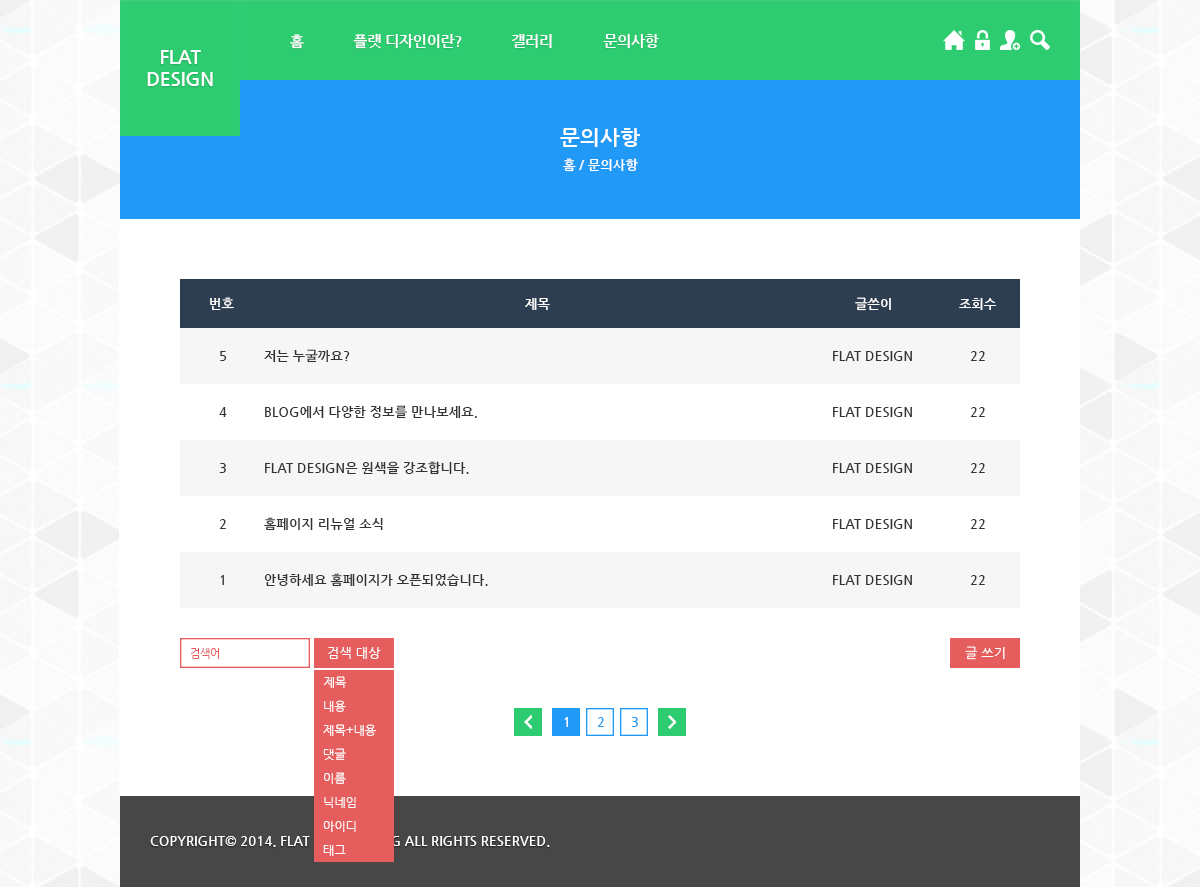
<style>
.page{position:relative;width:1200px;height:887px;background:#ffffff}
.page>*{position:absolute;margin:0}
.t1{font:14.7px "NanumGothicBold";color:#ffffff}
.t2{font:18.7px "NanumGothicBold";color:#ffffff}
.t3{font:21.3px "NanumGothicBold";color:#ffffff}
.t4{font:13.3px "NanumGothicBold";color:#ffffff}
.t5{font:13.3px "NanumGothicBold";color:#fefefe}
.t6{font:13.3px "NanumGothicBold";color:#333333}
.t7{font:10.7px "NanumGothic";color:#e65d5d}
.t8{font:13.3px "NanumGothic";color:#ffffff}
.t9{font:12px "NanumGothic";color:#fffefe}
.t10{font:13.3px "NanumGothicBold";color:#219af7}
</style>
<div class="page">
<p class="t1" style="left:290px;top:34px;width:14px;height:15px">홈</p>
<p class="t1" style="left:353px;top:34px;width:109px;height:15px">플랫 디자인이란?</p>
<p class="t1" style="left:512px;top:34px;width:40px;height:14px">갤러리</p>
<p class="t1" style="left:603px;top:34px;width:56px;height:14px">문의사항</p>
<p class="t2" style="left:147px;top:50px;width:66px;height:36px;text-align:center">FLAT<br>DESIGN</p>
<p class="t3" style="left:560px;top:128px;width:80px;height:19px">문의사항</p>
<p class="t4" style="left:563px;top:158px;width:75px;height:14px">홈 / 문의사항</p>
<p class="t5" style="left:210px;top:297px;width:24px;height:13px">번호</p>
<p class="t5" style="left:525px;top:298px;width:25px;height:12px">제목</p>
<p class="t5" style="left:855px;top:297px;width:36px;height:14px">글쓴이</p>
<p class="t5" style="left:959px;top:298px;width:38px;height:12px">조회수</p>
<p class="t6" style="left:220px;top:351px;width:7px;height:10px">5</p>
<p class="t6" style="left:264px;top:349px;width:86px;height:14px">저는 누굴까요?</p>
<p class="t6" style="left:833px;top:351px;width:79px;height:10px">FLAT DESIGN</p>
<p class="t6" style="left:970px;top:351px;width:15px;height:10px">22</p>
<p class="t6" style="left:219px;top:407px;width:8px;height:10px">4</p>
<p class="t6" style="left:265px;top:405px;width:212px;height:14px">BLOG에서 다양한 정보를 만나보세요.</p>
<p class="t6" style="left:833px;top:407px;width:79px;height:10px">FLAT DESIGN</p>
<p class="t6" style="left:970px;top:407px;width:15px;height:10px">22</p>
<p class="t6" style="left:265px;top:461px;width:204px;height:14px">FLAT DESIGN은 원색을 강조합니다.</p>
<p class="t6" style="left:219px;top:463px;width:7px;height:10px">3</p>
<p class="t6" style="left:833px;top:463px;width:79px;height:10px">FLAT DESIGN</p>
<p class="t6" style="left:970px;top:463px;width:15px;height:10px">22</p>
<p class="t6" style="left:219px;top:519px;width:7px;height:10px">2</p>
<p class="t6" style="left:264px;top:517px;width:119px;height:14px">홈페이지 리뉴얼 소식</p>
<p class="t6" style="left:833px;top:519px;width:79px;height:10px">FLAT DESIGN</p>
<p class="t6" style="left:970px;top:519px;width:15px;height:10px">22</p>
<p class="t6" style="left:220px;top:575px;width:4px;height:10px">1</p>
<p class="t6" style="left:264px;top:573px;width:224px;height:14px">안녕하세요 홈페이지가 오픈되었습니다.</p>
<p class="t6" style="left:833px;top:575px;width:79px;height:10px">FLAT DESIGN</p>
<p class="t6" style="left:970px;top:575px;width:15px;height:10px">22</p>
<p class="t7" style="left:191px;top:648px;width:28px;height:11px">검색어</p>
<p class="t8" style="left:328px;top:647px;width:53px;height:12px">검색 대상</p>
<p class="t8" style="left:965px;top:646px;width:40px;height:14px">글 쓰기</p>
<p class="t9" style="left:324px;top:676px;width:23px;height:12px">제목</p>
<p class="t9" style="left:324px;top:700px;width:22px;height:12px">내용</p>
<p class="t9" style="left:323px;top:724px;width:53px;height:12px">제목+내용</p>
<p class="t4" style="left:564px;top:717px;width:4px;height:10px">1</p>
<p class="t10" style="left:597px;top:717px;width:7px;height:10px">2</p>
<p class="t10" style="left:631px;top:717px;width:7px;height:10px">3</p>
<p class="t9" style="left:323px;top:748px;width:23px;height:12px">댓글</p>
<p class="t9" style="left:324px;top:772px;width:22px;height:12px">이름</p>
<p class="t9" style="left:324px;top:797px;width:32px;height:11px">닉네임</p>
<p class="t9" style="left:323px;top:821px;width:33px;height:11px">아이디</p>
<p class="t4" style="left:150px;top:836px;width:400px;height:11px">COPYRIGHT© 2014. FLAT DESIGN BLOG ALL RIGHTS RESERVED.</p>
<p class="t9" style="left:323px;top:845px;width:23px;height:11px">태그</p>
</div>
